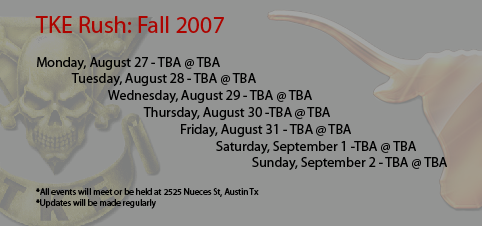
<style>
.page{position:relative;width:482px;height:226px;background:#939493}
.page>*{position:absolute;margin:0}
.t1{font:14px "MyriadPro-Regular";color:#000000}
.t2{font:24px "MyriadPro-Regular";color:#ad0400}
.t3{font:9px "MyriadPro-Regular";color:#000000}
</style>
<div class="page">
<p class="t1" style="left:35px;top:16px;width:412px;height:193px"><span class="t2">TKE Rush: Fall 2007<br></span><br>Monday, August 27 - TBA @ TBA<br> Tuesday, August 28 - TBA @ TBA<br>  Wednesday, August 29 - TBA @ TBA<br>   Thursday, August 30 -TBA @ TBA<br>    Friday, August 31 - TBA @ TBA<br>     Saturday, September 1 -TBA @ TBA<br>      Sunday, September 2 - TBA @ TBA<br><br><span class="t3">*All events will meet or be held at 2525 Nueces St, Austin Tx<br>*Updates will be made regularly</span></p>
</div>
